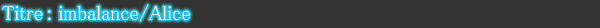
<style>
.page{position:relative;width:600px;height:28px;background:#333333}
.page>*{position:absolute;margin:0}
.t1{font:20px "MS-PMincho";color:#ffffff}
</style>
<div class="page">
<p class="t1" style="left:2px;top:4px;width:188px;height:18px">Titre : imbalance/Alice</p>
</div>
